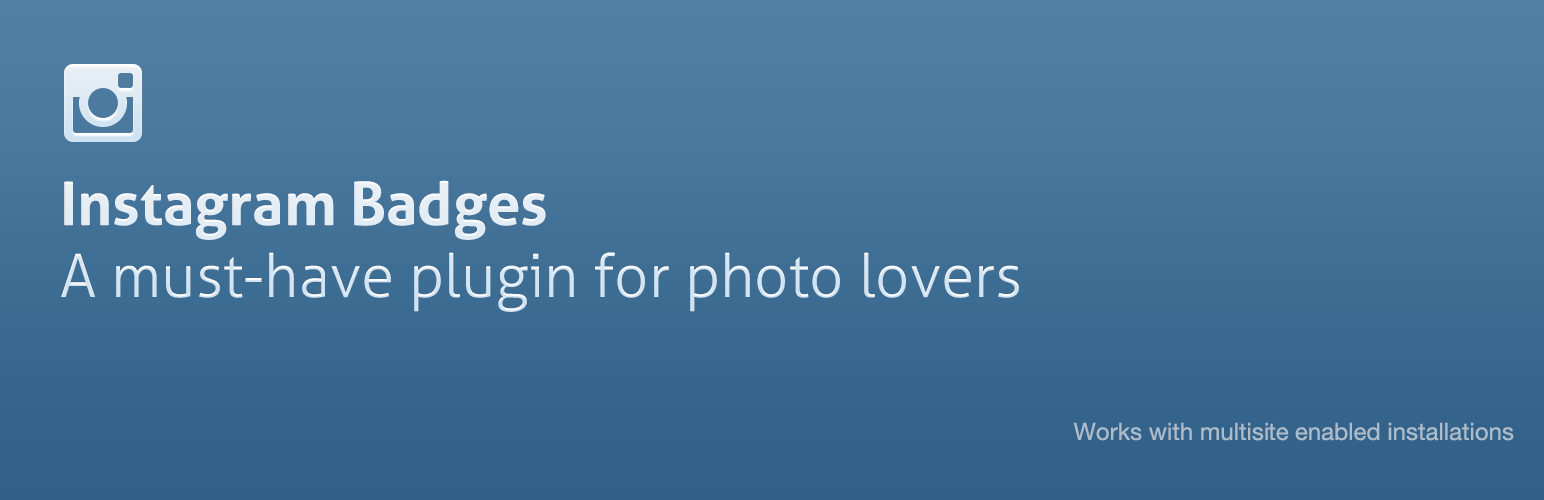
<style>
.page{position:relative;width:1544px;height:500px}
.page>*{position:absolute;margin:0}
.t1{font:60px "Aller-Light";color:#e3edf4}
.t2{font:60px "Aller-Bold";color:#e3edf4}
.t3{font:24px "HelveticaNeue";color:#adbcca}
</style>
<div class="page">
<p class="t1" style="left:61px;top:180px;width:958px;height:132px"><span class="t2">Instagram Badges<br></span>A must-have plugin for photo lovers</p>
<p class="t3" style="left:1073px;top:422px;width:441px;height:19px">Works with multisite enabled installations</p>
</div>
